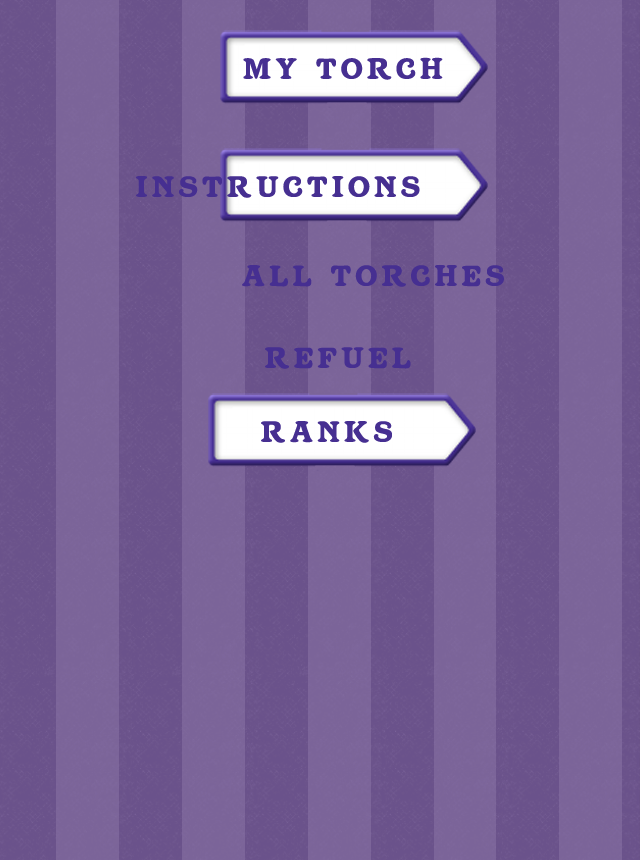
<style>
.page{position:relative;width:640px;height:860px}
.page>*{position:absolute;margin:0}
.t1{font:30px "JOYVILLE";letter-spacing:0.1em;color:#462f91}
</style>
<div class="page">
<p class="t1" style="left:243px;top:57px;width:200px;height:23px">MY TORCH</p>
<p class="t1" style="left:136px;top:176px;width:284px;height:22px">INSTRUCTIONS</p>
<p class="t1" style="left:242px;top:265px;width:262px;height:22px">ALL TORCHES</p>
<p class="t1" style="left:265px;top:347px;width:146px;height:22px">REFUEL</p>
<p class="t1" style="left:261px;top:421px;width:131px;height:22px">RANKS</p>
</div>
